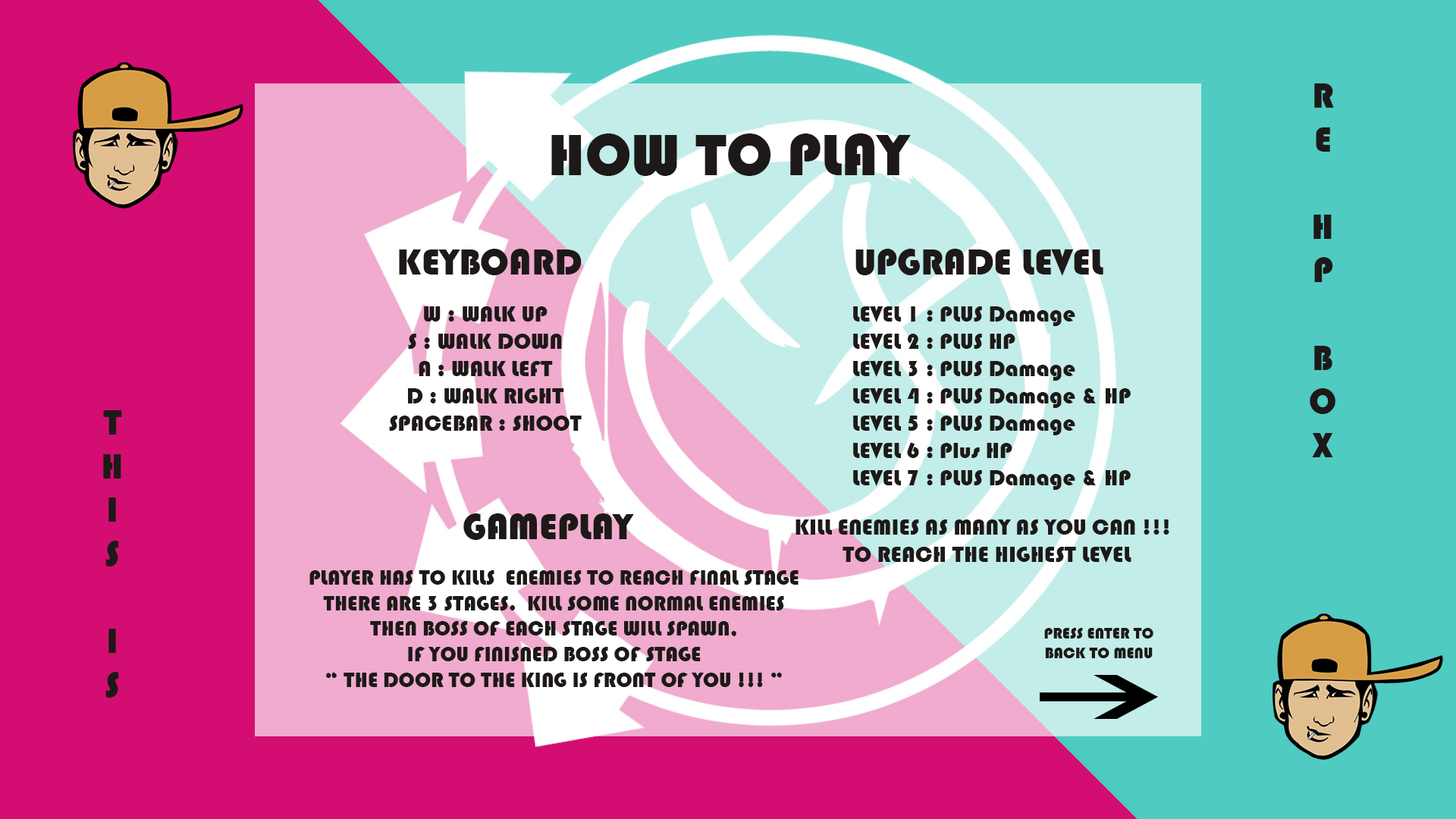
<style>
.page{position:relative;width:1456px;height:819px;background:#d40d72}
.page>*{position:absolute;margin:0}
.t1{font:36.4px "Bauhaus93";color:#1d1918}
.t2{font:60.7px "Bauhaus93";color:#1d1918}
.t3{font:37.9px "Bauhaus93";color:#1d1918}
.t4{font:22.7px "Bauhaus93";color:#1d1918}
.t5{font:21.2px "Bauhaus93";color:#1d1918}
.t6{font:15.9px "Bauhaus93";color:#1d1918}
</style>
<div class="page">
<p class="t1" style="left:1310px;top:83px;width:25px;height:374px;text-align:center">R<br>E<br><br>H<br>P<br><br>B<br>O<br>X</p>
<p class="t2" style="left:551px;top:133px;width:360px;height:43px">HOW TO PLAY</p>
<p class="t3" style="left:399px;top:249px;width:183px;height:26px">KEYBOARD</p>
<p class="t3" style="left:855px;top:249px;width:248px;height:27px">UPGRADE LEVEL</p>
<p class="t4" style="left:389px;top:306px;width:193px;height:125px;text-align:center">W : WALK UP<br>S : WALK DOWN<br>A : WALK LEFT<br>D : WALK RIGHT<br>SPACEBAR : SHOOT</p>
<p class="t4" style="left:853px;top:306px;width:278px;height:184px">LEVEL 1 : PLUS Damage <br>LEVEL 2 : PLUS HP<br>LEVEL 3 : PLUS Damage<br>LEVEL 4 : PLUS Damage &amp; HP<br>LEVEL 5 : PLUS Damage<br>LEVEL 6 : Plus HP<br>LEVEL 7 : PLUS Damage &amp; HP</p>
<p class="t1" style="left:103px;top:410px;width:19px;height:288px;text-align:center">T<br>H<br>I<br>S<br><br>I<br>S</p>
<p class="t3" style="left:463px;top:513px;width:171px;height:27px">GAMEPLAY</p>
<p class="t4" style="left:795px;top:519px;width:374px;height:44px">KILL ENEMIES AS MANY AS YOU CAN !!!<br>TO REACH THE HIGHEST LEVEL</p>
<p class="t5" style="left:309px;top:570px;width:490px;height:117px;text-align:center">PLAYER HAS TO KILLS  ENEMIES TO REACH FINAL STAGE<br>THERE ARE 3 STAGES.  KILL SOME NORMAL ENEMIES<br>THEN BOSS OF EACH STAGE WILL SPAWN, <br>IF YOU FINISNED BOSS OF STAGE <br>“ THE DOOR TO THE KING IS FRONT OF YOU !!! ”</p>
<p class="t6" style="left:1044px;top:628px;width:109px;height:30px;text-align:center">PRESS ENTER TO BACK TO MENU</p>
</div>
